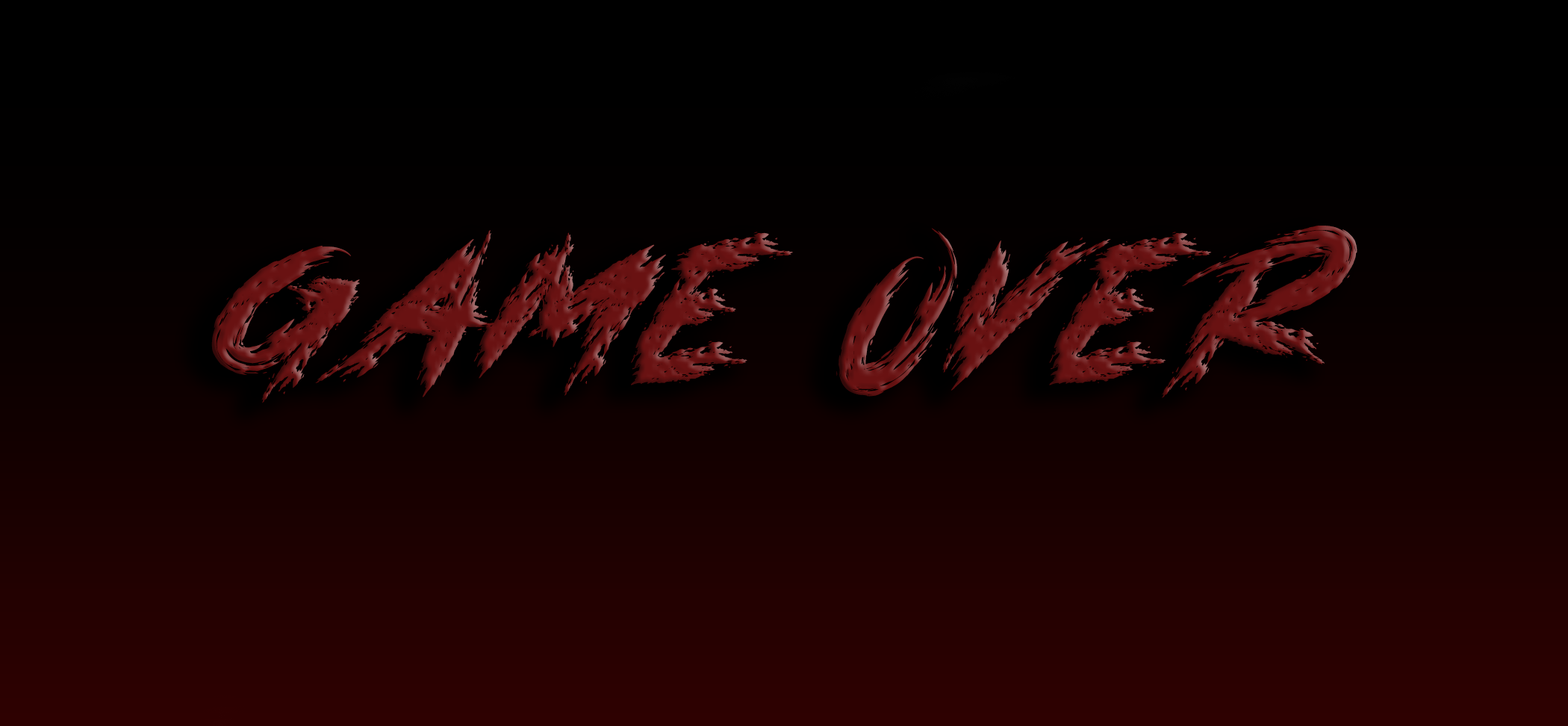
<style>
.page{position:relative;width:1568px;height:726px}
.page>*{position:absolute;margin:0}
.t1{font:224px "DANGERZONE";color:#691212}
</style>
<div class="page">
<p class="t1" style="left:211px;top:225px;width:1146px;height:178px">Game Over</p>
</div>
